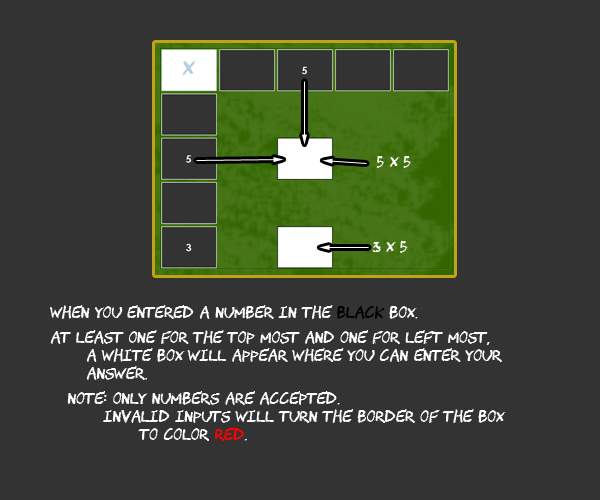
<style>
.page{position:relative;width:600px;height:500px;background:#333333}
.page>*{position:absolute;margin:0}
.t1{font:15px "CHAWP";color:#ffffff}
.t2{font:15px "CHAWP";color:#000000}
.t3{font:15px "CHAWP";color:#ff0000}
</style>
<div class="page">
<p class="t1" style="left:376px;top:156px;width:35px;height:12px">5 X 5</p>
<p class="t1" style="left:372px;top:241px;width:36px;height:12px">3 x 5</p>
<p class="t1" style="left:50px;top:305px;width:368px;height:14px">when you entered a number in the <span class="t2">black</span> box.</p>
<p class="t1" style="left:50px;top:330px;width:452px;height:50px">at least one for the top most and one for left most,<br> a white box will appear where you can enter your<br> answer.</p>
<p class="t1" style="left:67px;top:391px;width:439px;height:50px">note: only numbers are accepted. <br> invalid inputs will turn the border of the box <br>  to color <span class="t3">red</span>.</p>
</div>
